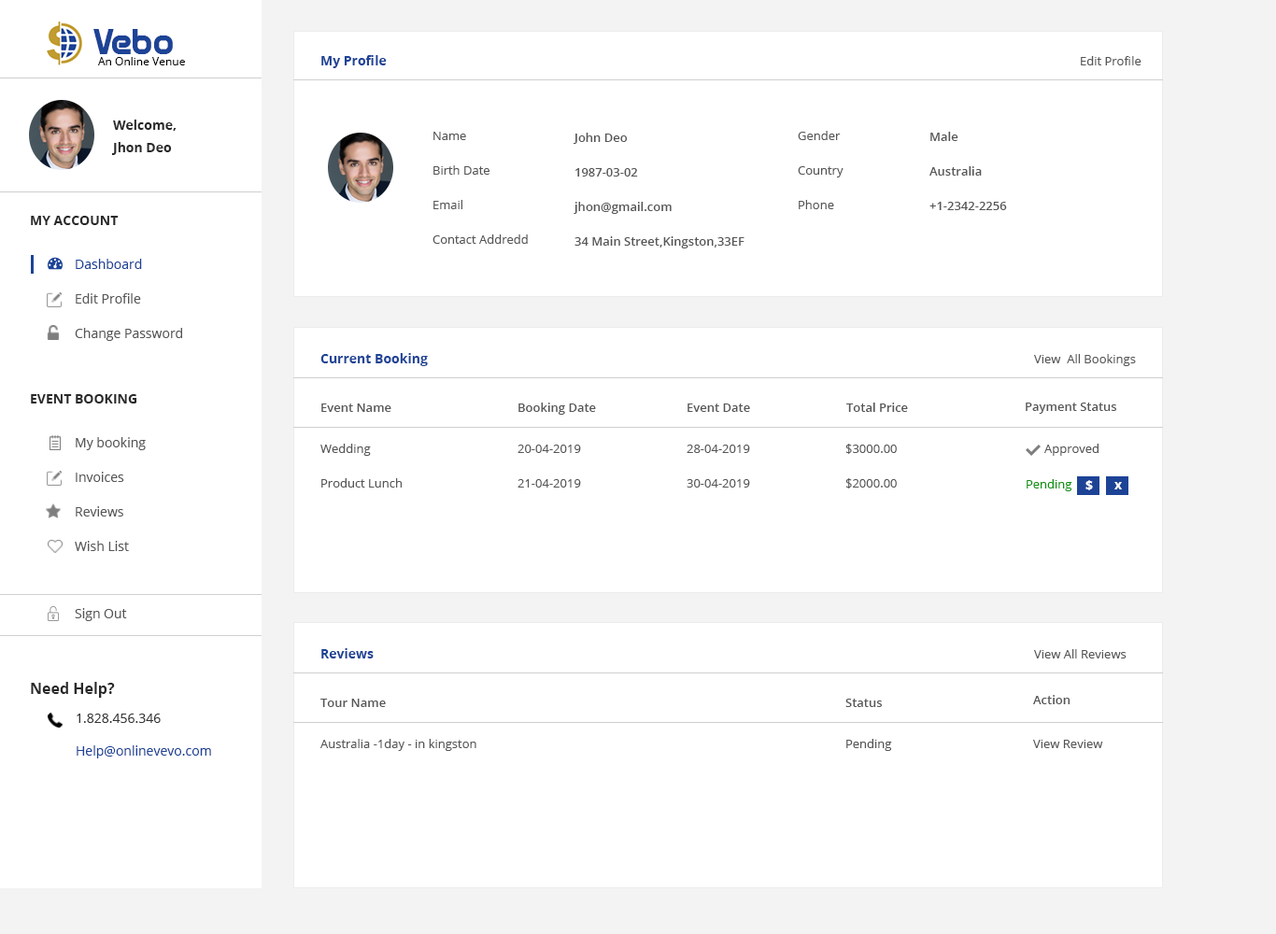
<style>
.page{position:relative;width:1276px;height:934px;background:#ffffff}
.page>*{position:absolute;margin:0}
.t1{font:34.6px "Oganesson";color:#1d4396}
.t2{font:11.2px "OpenSans";color:#000000}
.t3{font:13.1px "OpenSans-Bold";color:#1d4396}
.t4{font:12.1px "OpenSans";color:#575656}
.t5{font:13.1px/22.4px "OpenSans-Bold";color:#29292a}
.t6{font:12.1px/34.6px "OpenSans";color:#575656}
.t7{font:12.1px/34.6px "OpenSans-Semibold";color:#575656}
.t8{font:13.1px "OpenSans-Bold";color:#29292a}
.t9{font:13.1px/34.6px "OpenSans";color:#575656}
.t10{font:13.1px/34.6px "OpenSans";color:#1d4396}
.t11{font:12.1px "OpenSans-Semibold";color:#575656}
.t12{font:12.1px "OpenSans";color:#0e9211}
.t13{font:13.1px "OpenSans-Bold";color:#ffffff}
.t14{font:13.1px "OpenSans";color:#575656}
.t15{font:14.9px "OpenSans-Bold";color:#29292a}
.t16{font:13.1px "OpenSans";color:#343434}
.t17{font:13.1px "OpenSans";color:#1d4396}
</style>
<div class="page">
<p class="t1" style="left:93px;top:29px;width:80px;height:25px">Vebo</p>
<p class="t2" style="left:98px;top:57px;width:87px;height:8px">An Online Venue</p>
<p class="t3" style="left:321px;top:55px;width:66px;height:13px">My Profile</p>
<p class="t4" style="left:1081px;top:56px;width:61px;height:9px">Edit Profile</p>
<p class="t5" style="left:111px;top:120px;width:66px;height:35px">Welcome,<br>Jhon Deo</p>
<p class="t6" style="left:433px;top:132px;width:95px;height:112px">Name<br>Birth Date<br>Email<br>Contact Addredd</p>
<p class="t7" style="left:573px;top:133px;width:172px;height:116px">John Deo<br>1987-03-02<br>jhon@gmail.com<br>34 Main Street,Kingston,33EF</p>
<p class="t6" style="left:798px;top:131px;width:46px;height:78px">Gender<br>Country<br>Phone</p>
<p class="t7" style="left:930px;top:132px;width:77px;height:78px">Male<br>Australia<br>+1-2342-2256</p>
<p class="t8" style="left:31px;top:216px;width:88px;height:9px">MY ACCOUNT</p>
<p class="t9" style="left:75px;top:259px;width:107px;height:82px"><span class="t10">Dashboard<br></span>Edit Profile<br>Change Password</p>
<p class="t3" style="left:320px;top:353px;width:108px;height:13px">Current Booking</p>
<p class="t4" style="left:1034px;top:354px;width:102px;height:12px">View  All Bookings</p>
<p class="t8" style="left:31px;top:394px;width:106px;height:10px">EVENT BOOKING</p>
<p class="t11" style="left:321px;top:404px;width:70px;height:8px">Event Name</p>
<p class="t11" style="left:519px;top:403px;width:77px;height:12px">Booking Date</p>
<p class="t11" style="left:688px;top:404px;width:62px;height:8px">Event Date</p>
<p class="t11" style="left:846px;top:403px;width:62px;height:9px">Total Price</p>
<p class="t11" style="left:1026px;top:403px;width:91px;height:11px">Payment Status</p>
<p class="t9" style="left:75px;top:437px;width:71px;height:114px">My booking<br>Invoices<br>Reviews<br>Wish List</p>
<p class="t4" style="left:320px;top:444px;width:51px;height:12px">Wedding</p>
<p class="t4" style="left:518px;top:445px;width:63px;height:8px">20-04-2019</p>
<p class="t4" style="left:687px;top:445px;width:63px;height:8px">28-04-2019</p>
<p class="t4" style="left:846px;top:444px;width:51px;height:10px">$3000.00</p>
<p class="t4" style="left:1045px;top:444px;width:54px;height:12px">Approved</p>
<p class="t4" style="left:321px;top:478px;width:81px;height:10px">Product Lunch</p>
<p class="t4" style="left:518px;top:479px;width:63px;height:9px">21-04-2019</p>
<p class="t4" style="left:687px;top:479px;width:63px;height:9px">30-04-2019</p>
<p class="t4" style="left:846px;top:478px;width:51px;height:11px">$2000.00</p>
<p class="t12" style="left:1027px;top:479px;width:46px;height:12px">Pending</p>
<p class="t13" style="left:1086px;top:480px;width:7px;height:11px">$</p>
<p class="t13" style="left:1115px;top:482px;width:7px;height:8px">x</p>
<p class="t14" style="left:75px;top:608px;width:52px;height:13px">Sign Out</p>
<p class="t3" style="left:321px;top:648px;width:53px;height:11px">Reviews</p>
<p class="t4" style="left:1034px;top:649px;width:93px;height:10px">View All Reviews</p>
<p class="t15" style="left:31px;top:682px;width:84px;height:16px">Need Help?</p>
<p class="t11" style="left:320px;top:699px;width:66px;height:8px">Tour Name</p>
<p class="t11" style="left:846px;top:699px;width:36px;height:8px">Status</p>
<p class="t11" style="left:1033px;top:695px;width:38px;height:9px">Action</p>
<p class="t16" style="left:77px;top:714px;width:84px;height:9px">1.828.456.346</p>
<p class="t17" style="left:77px;top:746px;width:134px;height:13px">Help@onlinevevo.com</p>
<p class="t4" style="left:320px;top:739px;width:156px;height:12px">Australia -1day - in kingston</p>
<p class="t4" style="left:846px;top:739px;width:46px;height:12px">Pending</p>
<p class="t4" style="left:1033px;top:740px;width:70px;height:8px">View Review</p>
</div>
